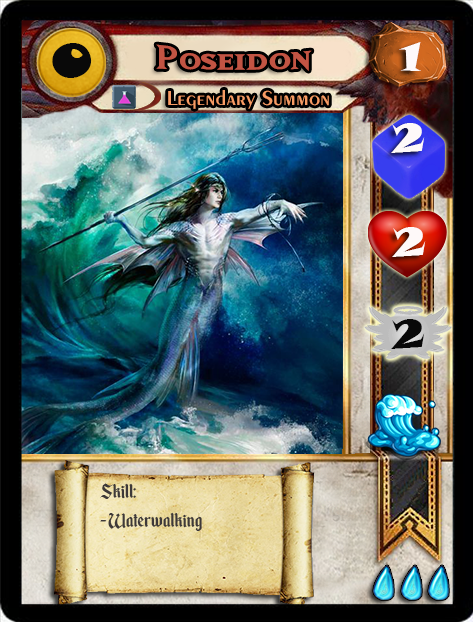
<style>
.page{position:relative;width:473px;height:622px}
.page>*{position:absolute;margin:0}
.t1{font:46.6px "SnapITC-Regular";color:#090909;scale:1.05 1}
.t2{font:40px "MatrixBoldSmallCaps";color:#c25443;scale:1.06 1}
.t3{font:40px "SnapITC-Regular";color:#fef9f9;scale:1.05 1}
.t4{font:21.3px "Exotic350BT-DemiBold";color:#f89c64;scale:1.06 1}
.t5{font:40px "SnapITC-Regular";color:#090909;scale:1.05 1}
.t6{font:24px "EnchantedLand";color:#3e3939}
</style>
<div class="page">
<p class="t1" style="left:52px;top:43px;width:40px;height:35px">0</p>
<p class="t2" style="left:156px;top:44px;width:156px;height:27px">Poseidon</p>
<p class="t3" style="left:399px;top:42px;width:22px;height:29px">1</p>
<p class="t4" style="left:168px;top:90px;width:161px;height:19px">Legendary Summon</p>
<p class="t3" style="left:391px;top:123px;width:34px;height:30px">2</p>
<p class="t3" style="left:392px;top:227px;width:34px;height:30px">2</p>
<p class="t5" style="left:391px;top:319px;width:34px;height:30px">2</p>
<p class="t6" style="left:100px;top:483px;width:102px;height:48px">Skill:<br>- Waterwalking</p>
</div>
